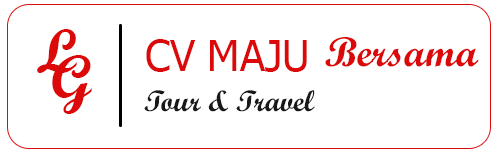
<style>
.page{position:relative;width:500px;height:158px;background:#ffffff}
.page>*{position:absolute;margin:0}
.t1{font:62.4px/1.9px "ScriptMTBold";color:#db0909}
.t2{font:41.6px "Tahoma";color:#db0909}
.t3{font:41.6px "ScriptMTBold";color:#db0909}
.t4{font:29.9px "ScriptMTBold";color:#191818}
</style>
<div class="page">
<p class="t1" style="left:37px;top:29px;width:55px;height:85px">L<br><br><br><br><br><br><br><br><br><br><br><br><br><br> G</p>
<p class="t2" style="left:146px;top:39px;width:161px;height:33px">CV MAJU</p>
<p class="t3" style="left:325px;top:37px;width:154px;height:30px">Bersama</p>
<p class="t4" style="left:144px;top:90px;width:171px;height:22px">Tour &amp; Travel</p>
</div>
